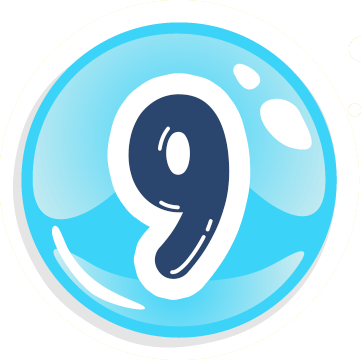
<style>
.page{position:relative;width:361px;height:364px;background:#ffffff}
.page>*{position:absolute;margin:0}
.t1{font:262.5px "BubbleBobble";color:#2a456e}
</style>
<div class="page">
<p class="t1" style="left:128px;top:94px;width:102px;height:185px">9</p>
</div>
